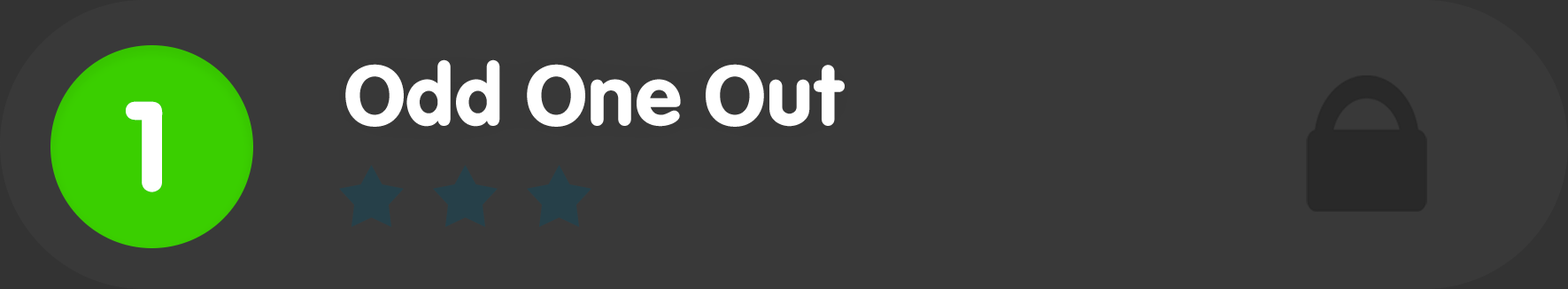
<style>
.page{position:relative;width:1568px;height:289px;background:#393939}
.page>*{position:absolute;margin:0}
.t1{font:88.5px "VAGRundschriftD";color:#ffffff}
.t2{font:132.8px "VAGRundschriftD";color:#ffffff}
</style>
<div class="page">
<p class="t1" style="left:345px;top:59px;width:500px;height:68px">Odd One Out</p>
<p class="t2" style="left:126px;top:101px;width:37px;height:91px">1</p>
</div>
